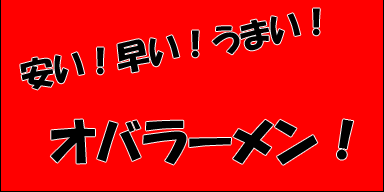
<style>
.page{position:relative;width:384px;height:192px;background:#ff0000}
.page>*{position:absolute;margin:0}
.t1{font:33.3px "HGPSoeiKakupoptai";color:#000000}
.t2{font:50px "HGPSoeiKakupoptai";color:#000000}
</style>
<div class="page">
<p class="t1" style="left:20px;top:8px;width:300px;height:82px;rotate:-10deg">安い！早い！うまい！</p>
<p class="t2" style="left:50px;top:119px;width:304px;height:46px">オバラーメン！</p>
</div>
